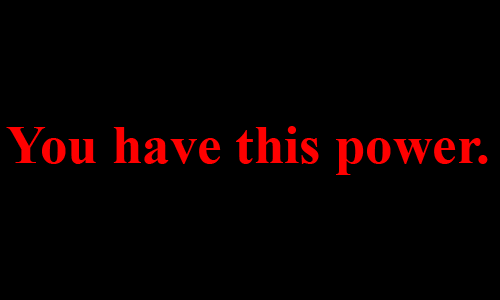
<style>
.page{position:relative;width:500px;height:300px;background:#000000}
.page>*{position:absolute;margin:0}
.t1{font:55px "TimesNewRomanPS-BoldMT";color:#ff0000}
.t2{font:36px "TimesNewRomanPSMT";color:#ffffff}
</style>
<div class="page">
<p class="t1" style="left:6px;top:126px;width:482px;height:49px"><span class="t2"><br><br></span>You have this power.</p>
</div>
